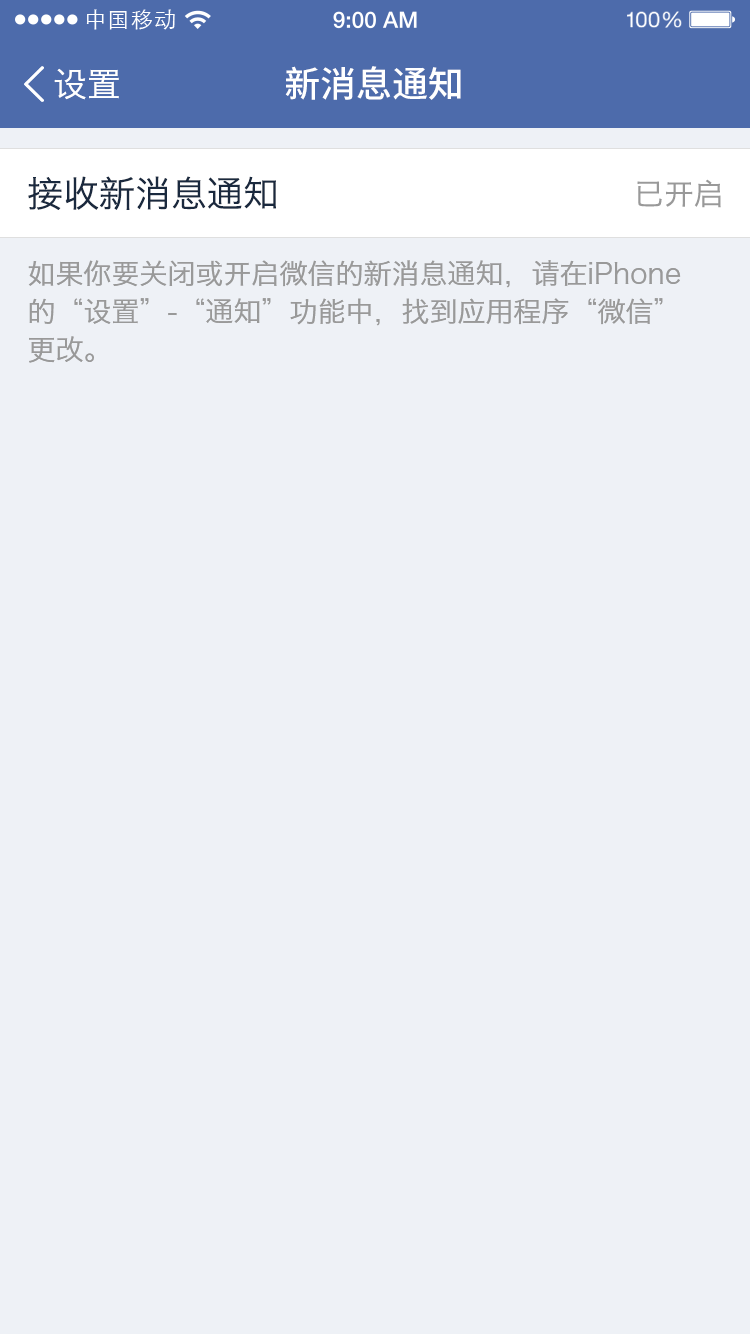
<style>
.page{position:relative;width:750px;height:1334px;background:#eef1f6}
.page>*{position:absolute;margin:0}
.t1{font:21.9px "STXihei";letter-spacing:0.04em;color:#ffffff}
.t2{font:34px "HiraginoSansGB-W3";color:#ffffff}
.t3{font:36px "NotoSansHans-Medium";color:#ffffff}
.t4{font:36px "HiraginoSansGB-W3";color:#1a293e}
.t5{font:30px "HiraginoSansGB-W3";color:#999999}
.t6{font:28px/38px "HiraginoSansGB-W3";color:#999999}
</style>
<div class="page">
<p class="t1" style="left:86px;top:9px;width:89px;height:21px">中国移动</p>
<p class="t2" style="left:54px;top:68px;width:65px;height:32px">设置</p>
<p class="t3" style="left:285px;top:66px;width:176px;height:34px">新消息通知</p>
<p class="t4" style="left:28px;top:176px;width:248px;height:34px">接收新消息通知</p>
<p class="t5" style="left:637px;top:179px;width:84px;height:29px">已开启</p>
<p class="t6" style="left:28px;top:260px;width:653px;height:103px">如果你要关闭或开启微信的新消息通知，请在iPhone<br>的“设置”-“通知”功能中，找到应用程序“微信”<br>更改。</p>
</div>
